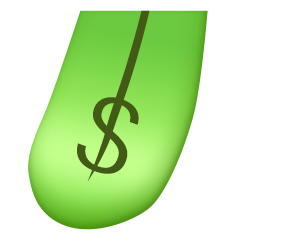
<style>
.page{position:relative;width:284px;height:242px;background:#ffffff}
.page>*{position:absolute;margin:0}
.t1{font:110px "AcuminConcept-CondensedLight";letter-spacing:0.025em;color:#435916;text-transform:uppercase;scale:1.3 1}
</style>
<div class="page">
<p class="t1" style="left:77px;top:97px;width:62px;height:77px;rotate:20deg">S</p>
</div>
